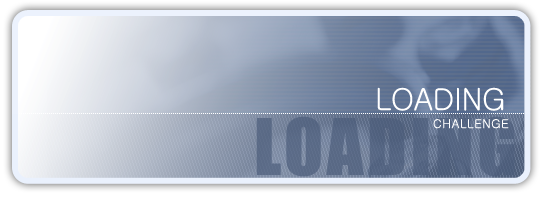
<style>
.page{position:relative;width:542px;height:198px}
.page>*{position:absolute;margin:0}
.t1{font:30px "Gulim";letter-spacing:-0.013em;color:#ffffff;text-transform:uppercase}
.t2{font:72px "Impact";letter-spacing:0.05em;color:#4b5c7a;text-transform:uppercase}
.t3{font:12px "Gulim";letter-spacing:0.05em;color:#ffffff;text-transform:uppercase}
</style>
<div class="page">
<p class="t1" style="left:377px;top:87px;width:127px;height:24px">LOADING</p>
<p class="t2" style="left:256px;top:116px;width:259px;height:61px;opacity:0.68">LOADING</p>
<p class="t3" style="left:433px;top:119px;width:76px;height:10px">CHALLENGE</p>
</div>
